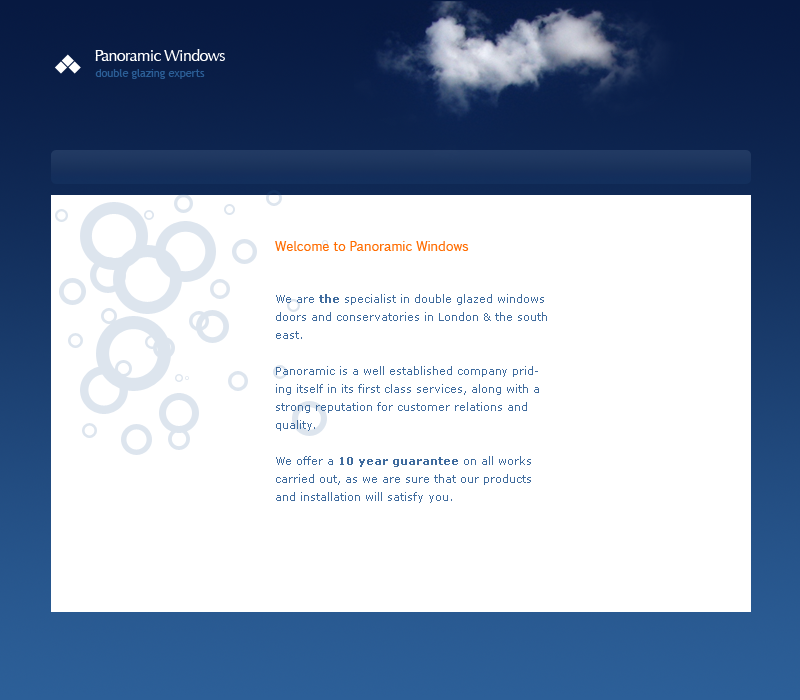
<style>
.page{position:relative;width:800px;height:700px;background:#ffffff}
.page>*{position:absolute;margin:0}
.t1{font:16px "Optima-Regular";letter-spacing:-0.04em;color:#ffffff}
.t2{font:11px "TrebuchetMS";letter-spacing:-0.01em;color:#2b5e96}
.t3{font:13px "Pigiarniq";color:#ff6c00}
.t4{font:11px/18px "Verdana";color:#406c9e}
.t5{font:11px/18px "Verdana-Bold";color:#406c9e}
</style>
<div class="page">
<p class="t1" style="left:95px;top:49px;width:130px;height:12px">Panoramic Windows</p>
<p class="t2" style="left:95px;top:69px;width:110px;height:10px">double glazing experts</p>
<p class="t3" style="left:275px;top:241px;width:194px;height:10px">Welcome to Panoramic Windows</p>
<p class="t4" style="left:276px;top:294px;width:271px;height:209px">We are <span class="t5">the</span> specialist in double glazed windows doors and conservatories in London &amp; the south east.<br><br>Panoramic is a well established company priding itself in its first class services, along with a strong reputation for customer relations and quality.<br><br>We offer a <span class="t5">10 year guarantee</span> on all works carried out, as we are sure that our products and installation will satisfy you.</p>
</div>
